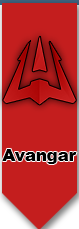
<style>
.page{position:relative;width:79px;height:229px;background:#c41e1e}
.page>*{position:absolute;margin:0}
.t1{font:16.7px "Arial-Black";letter-spacing:-0.01em;color:#000000}
</style>
<div class="page">
<p class="t1" style="left:2px;top:149px;width:75px;height:15px">Avangar</p>
</div>
